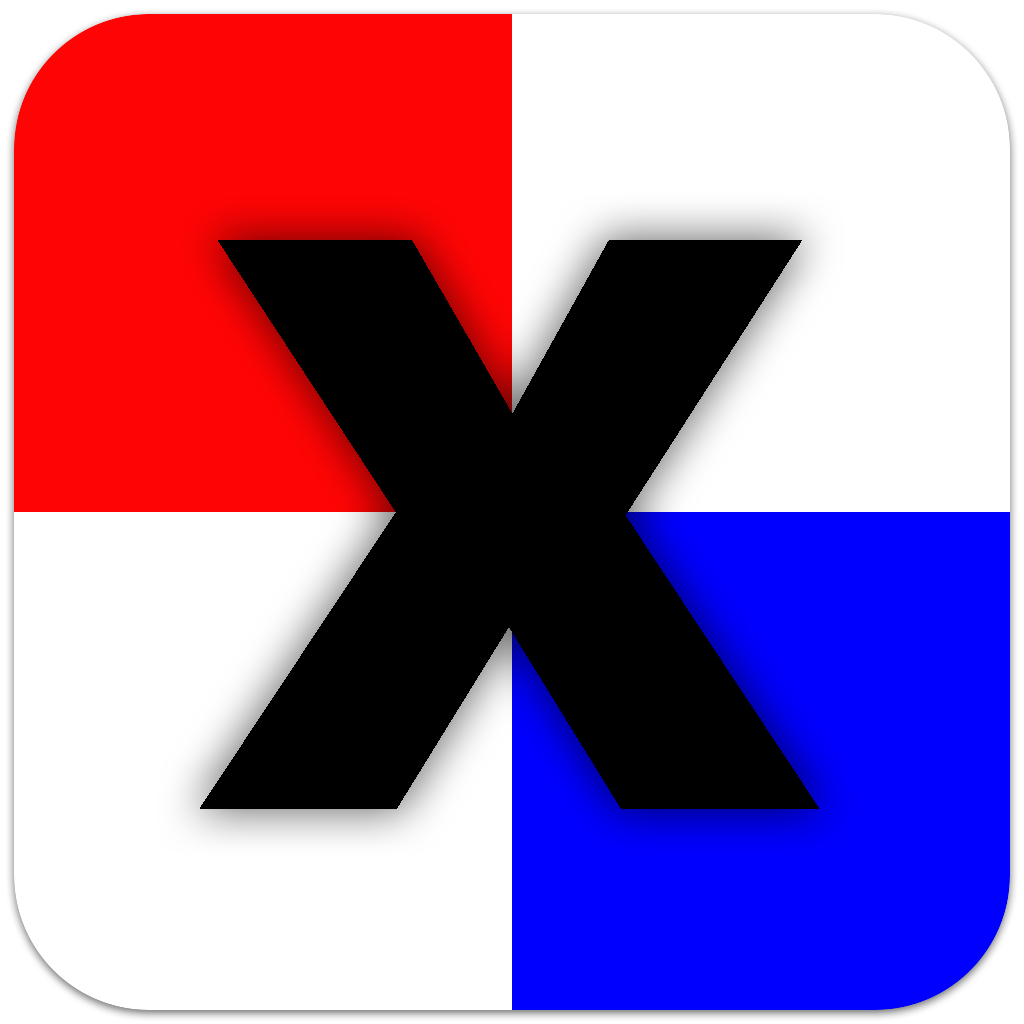
<style>
.page{position:relative;width:1024px;height:1024px;background:#ffffff}
.page>*{position:absolute;margin:0}
.t1{font:793.7px "Arial-Black";letter-spacing:0.05em;color:#000000}
</style>
<div class="page">
<p class="t1" style="left:200px;top:240px;width:619px;height:569px">X</p>
</div>
